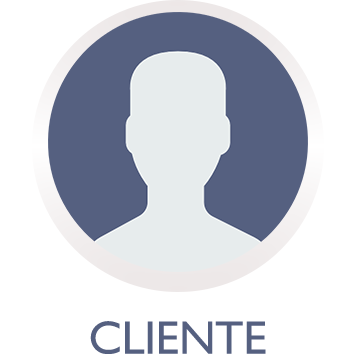
<style>
.page{position:relative;width:354px;height:354px;background:#ffffff}
.page>*{position:absolute;margin:0}
.t1{font:47.2px "GillSansMT";letter-spacing:-0.01em;color:#556080}
</style>
<div class="page">
<p class="t1" style="left:90px;top:321px;width:176px;height:33px">CLIENTE</p>
</div>
